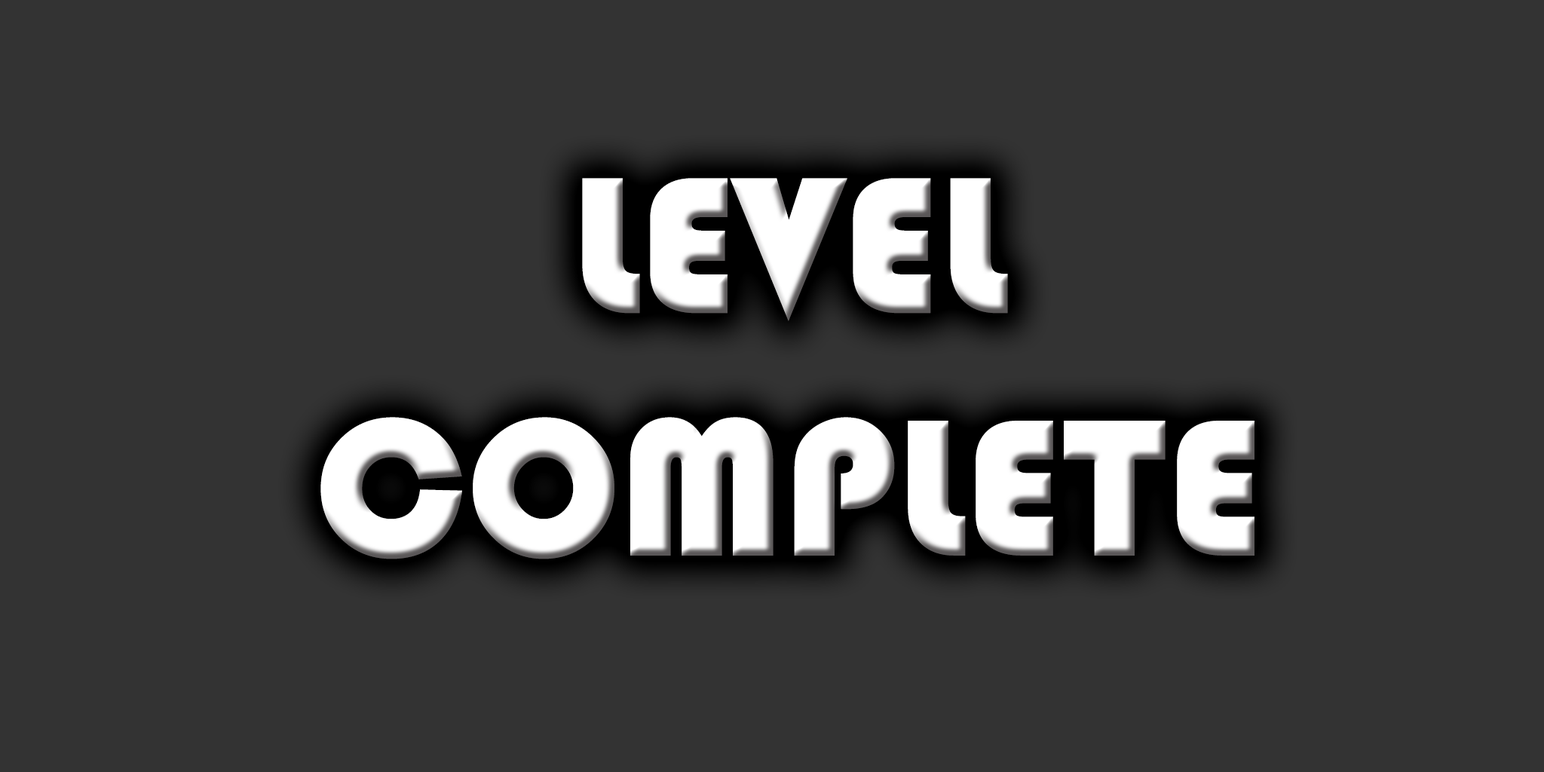
<style>
.page{position:relative;width:1544px;height:772px;background:#333333}
.page>*{position:absolute;margin:0}
.t1{font:202.1px "Bauhaus93";color:#ffffff}
</style>
<div class="page">
<p class="t1" style="left:320px;top:178px;width:935px;height:382px;text-align:center">LEVEL<br>COMPLETE</p>
</div>
